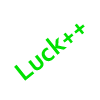
<style>
.page{position:relative;width:100px;height:100px;background:#ffffff}
.page>*{position:absolute;margin:0}
.t1{font:27.3px "Corbel-Bold";color:#00e100}
</style>
<div class="page">
<p class="t1" style="left:14px;top:23px;width:71px;height:58px;rotate:-39deg">Luck++</p>
</div>
